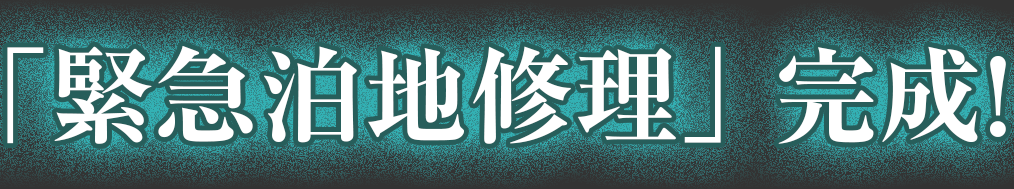
<style>
.page{position:relative;width:1014px;height:189px}
.page>*{position:absolute;margin:0}
.t1{font:105px "RyuminPr6N-ExBold";color:#ffffff}
.t2{font:105px "RyuminPr6N-ExBold";letter-spacing:-0.1em;color:#ffffff}
</style>
<div class="page">
<p class="t1" style="left:7px;top:45px;width:999px;height:99px">「緊急泊地修理<span class="t2">」</span>完成!</p>
</div>
